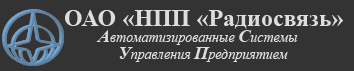
<style>
.page{position:relative;width:354px;height:71px;background:#333333}
.page>*{position:absolute;margin:0}
.t1{font:24px "TimesNewRomanPS-BoldMT";color:#dddddd}
.t2{font:14px "TimesNewRomanPS-ItalicMT";color:#dddddd}
.t3{font:18px "TimesNewRomanPS-BoldItalicMT";color:#dddddd}
</style>
<div class="page">
<p class="t1" style="left:65px;top:10px;width:278px;height:19px">ОАО «НПП «Радиосвязь»</p>
<p class="t2" style="left:96px;top:30px;width:202px;height:15px"><span class="t3">А</span>втоматизированные <span class="t3">С</span>истемы</p>
<p class="t2" style="left:119px;top:47px;width:169px;height:15px"><span class="t3">У</span>правления <span class="t3">П</span>редприятием</p>
</div>
